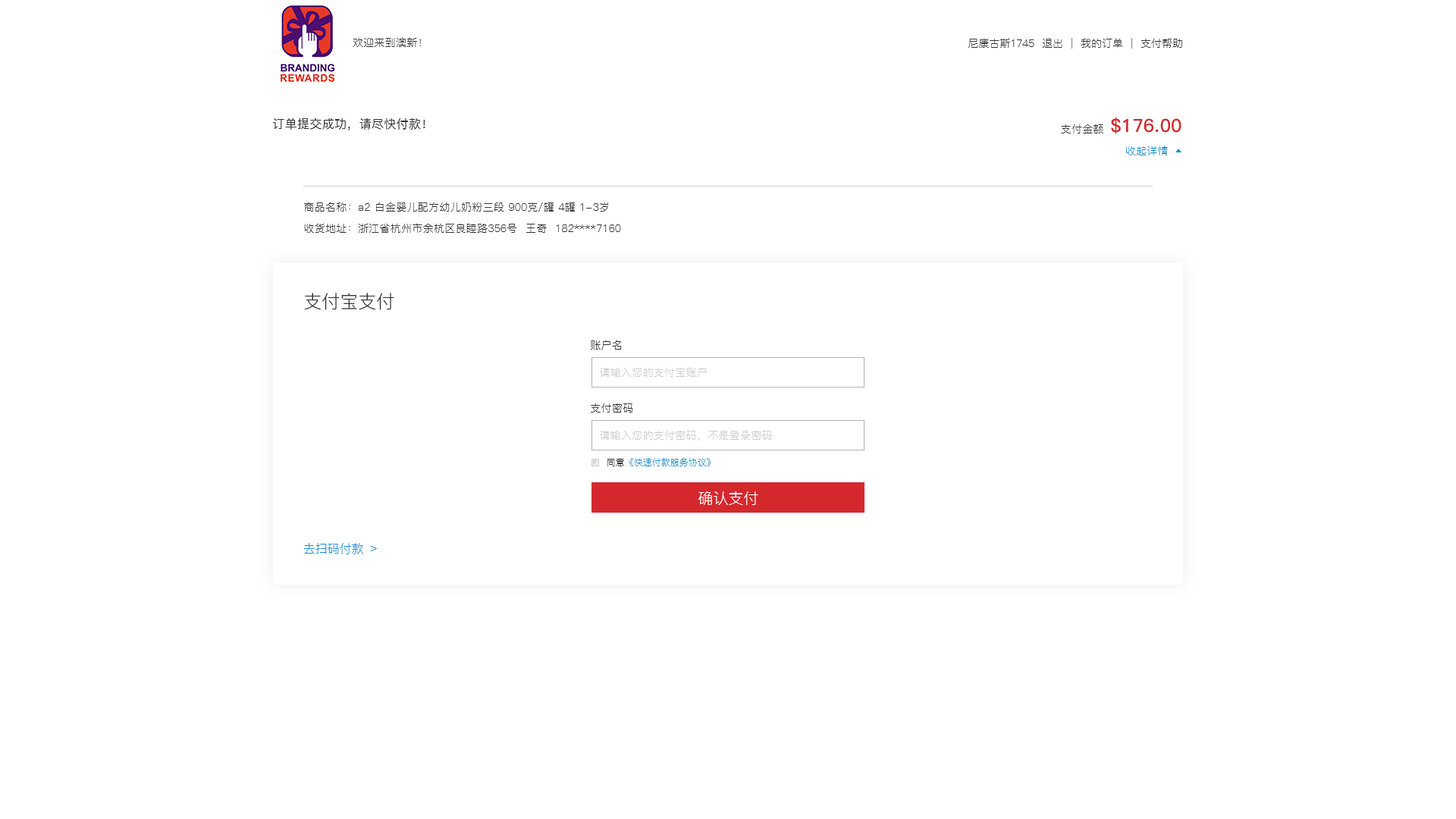
<style>
.page{position:relative;width:1456px;height:819px;background:#ffffff}
.page>*{position:absolute;margin:0}
.t1{font:10.6px "PingFang-SC-Regular";letter-spacing:0.02em;color:#333333}
.t2{font:10.6px "PingFang-SC-Regular";color:#333333}
.t3{font:12.1px "PingFang-SC-Medium";letter-spacing:0.02em;color:#333333}
.t4{font:18.2px "PingFang-SC-Bold";letter-spacing:0.02em;color:#d4282d}
.t5{font:10.6px "PingFang-SC-Regular";letter-spacing:0.02em;color:#148fcc}
.t6{font:18.2px "PingFang-SC-Regular";color:#333333}
.t7{font:10.6px "PingFang-SC-Regular";letter-spacing:0.02em;color:#cccccc}
.t8{font:9.1px "PingFang-SC-Regular";color:#148fcc}
.t9{font:9.1px "PingFang-SC-Regular";color:#333333}
.t10{font:15.2px "PingFang-SC-Regular";color:#ffffff}
.t11{font:12.1px "PingFang-SC-Regular";color:#148fcc}
</style>
<div class="page">
<p class="t1" style="left:353px;top:37px;width:68px;height:10px">欢迎来到澳新！</p>
<p class="t2" style="left:968px;top:38px;width:214px;height:11px">尼康古斯1745  退出  |  我的订单  |  支付帮助</p>
<p class="t3" style="left:273px;top:118px;width:152px;height:12px">订单提交成功，请尽快付款！</p>
<p class="t1" style="left:1061px;top:124px;width:42px;height:9px">支付金额</p>
<p class="t4" style="left:1111px;top:117px;width:70px;height:17px">$176.00</p>
<p class="t5" style="left:1125px;top:146px;width:43px;height:9px">收起详情</p>
<p class="t1" style="left:304px;top:202px;width:304px;height:10px">商品名称：a2 白金婴儿配方幼儿奶粉三段 900克/罐 4罐 1-3岁</p>
<p class="t1" style="left:304px;top:223px;width:317px;height:10px">收货地址：浙江省杭州市余杭区良睦路356号  王奇  182****7160</p>
<p class="t6" style="left:304px;top:293px;width:90px;height:17px">支付宝支付</p>
<p class="t1" style="left:591px;top:340px;width:31px;height:10px">账户名</p>
<p class="t7" style="left:600px;top:367px;width:107px;height:10px">请输入您的支付宝账户</p>
<p class="t1" style="left:591px;top:403px;width:42px;height:10px">支付密码</p>
<p class="t7" style="left:600px;top:430px;width:172px;height:11px">请输入您的支付密码，不是登录密码</p>
<p class="t8" style="left:607px;top:458px;width:104px;height:8px"><span class="t9">同意</span>《快速付款服务协议》</p>
<p class="t10" style="left:698px;top:491px;width:60px;height:14px">确认支付</p>
<p class="t11" style="left:303px;top:543px;width:74px;height:11px">去扫码付款 ﹥</p>
</div>
